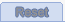
<style>
.page{position:relative;width:65px;height:22px;background:#d2ddf1}
.page>*{position:absolute;margin:0}
.t1{font:12px "ArialMT";color:#949494;font-weight:bold}
</style>
<div class="page">
<p class="t1" style="left:16px;top:7px;width:33px;height:10px">Reset</p>
</div>
